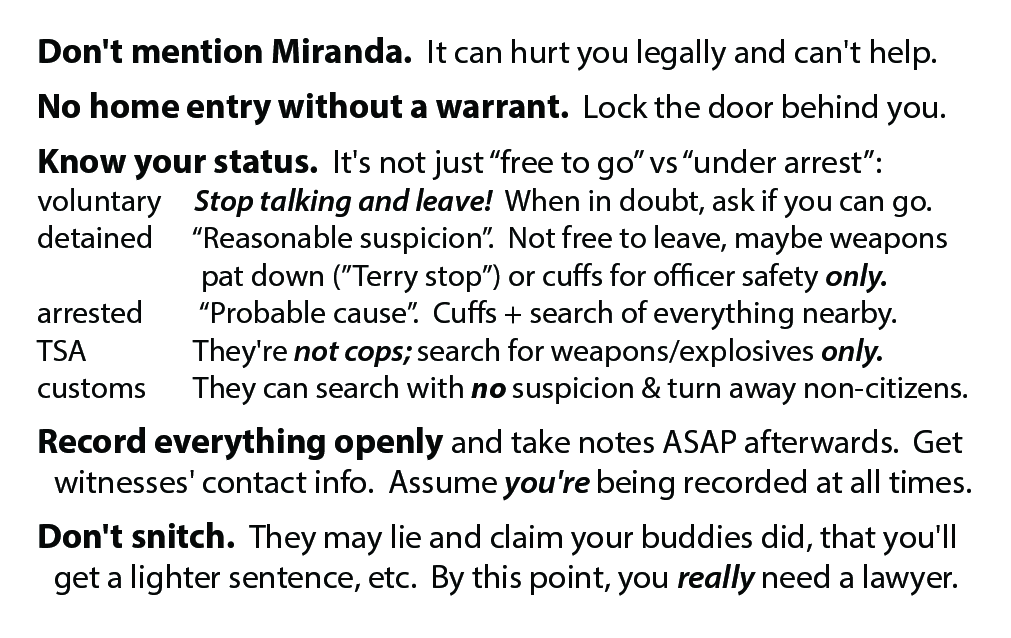
<style>
.page{position:relative;width:1011px;height:638px;background:#ffffff}
.page>*{position:absolute;margin:0}
.t1{font:31.2px "MyriadPro-Regular";color:#060808}
.t2{font:35.4px "MyriadPro-Bold";color:#060808}
.t3{font:33.3px "MyriadPro-Regular";color:#060808}
.t4{font:31.2px "MyriadPro-SemiboldIt";color:#060808}
.t5{font:31.2px "MyriadPro-BoldIt";color:#060808}
.t6{font:33.3px "MyriadPro-SemiboldIt";color:#060808}
</style>
<div class="page">
<p class="t1" style="left:36px;top:37px;width:935px;height:559px"><span class="t2">Don't mention Miranda.  </span><span class="t3">It can hurt you legally and can't help.<br></span><span class="t2">No home entry without a warrant.</span><span class="t3">  Lock the door behind you.<br></span><span class="t2">Know your status. </span><span class="t3"> It's not just “free to go” vs “under arrest”:<br></span>voluntary   <span class="t4">Stop talking and leave!</span>  When in doubt, ask if you can go.<br>detained   “Reasonable suspicion”.  Not free to leave, maybe weapons<br>       pat down (”Terry stop”) or cuffs for officer safety <span class="t4">only.<br></span>arrested     “Probable cause”.  Cuffs + search of everything nearby.<br>TSA     They're <span class="t4">not cops; </span>search for weapons/explosives <span class="t4">only.<br></span>customs   They can search with <span class="t5">no </span>suspicion &amp; turn away non-citizens.<br><span class="t2">Record everything openly</span><span class="t3"> and take notes ASAP afterwards.  Get witnesses' contact info.  Assume </span><span class="t6">you're </span><span class="t3">being recorded at all times.<br></span><span class="t2">Don't snitch.  </span><span class="t3">They may lie and claim your buddies did, that you'll get a lighter sentence, etc.  By this point, you </span><span class="t6">really </span><span class="t3">need a lawyer.<br></span><span class="t2">Memorize the prompt card.  </span><span class="t3">You can't read it with cuffs on.</span></p>
</div>
